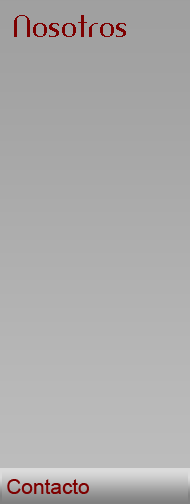
<style>
.page{position:relative;width:190px;height:504px}
.page>*{position:absolute;margin:0}
.t1{font:29.2px "AmerikaSans";color:#7e0000}
.t2{font:20.8px "ArialMT";color:#7e0000}
</style>
<div class="page">
<p class="t1" style="left:14px;top:15px;width:112px;height:22px">Nosotros</p>
<p class="t2" style="left:7px;top:479px;width:82px;height:15px">Contacto</p>
</div>
